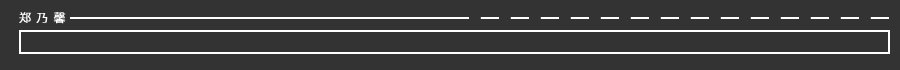
<style>
.page{position:relative;width:900px;height:70px;background:#333333}
.page>*{position:absolute;margin:0}
.t1{font:12px "NotoSansCJKsc-DemiLight";letter-spacing:0.4em;color:#ffffff;font-weight:bold}
</style>
<div class="page">
<p class="t1" style="left:19px;top:12px;width:47px;height:12px">郑乃馨</p>
</div>
